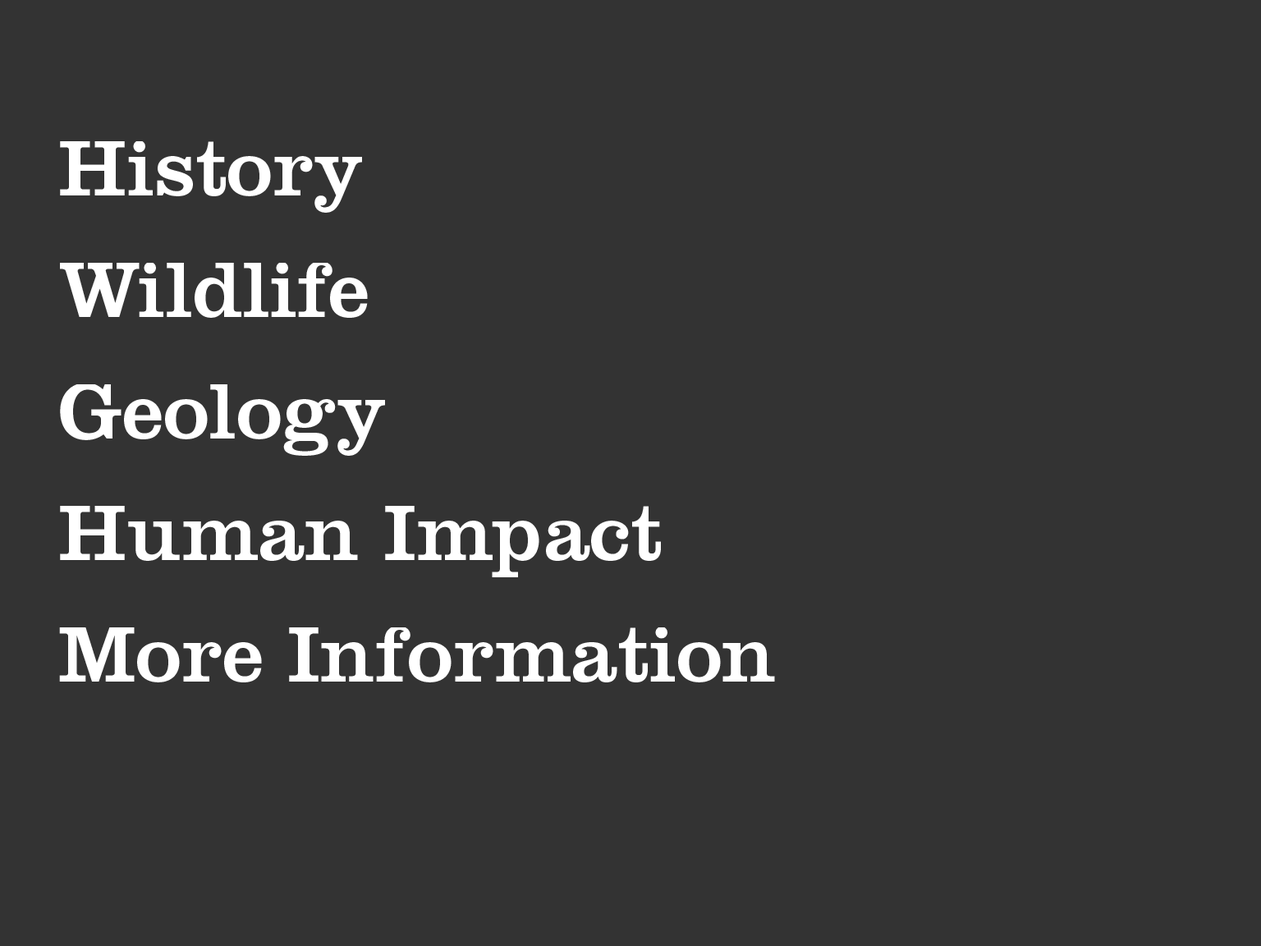
<style>
.page{position:relative;width:1261px;height:946px;background:#333333}
.page>*{position:absolute;margin:0}
.t1{font:82.1px "ClarendonLT";color:#ffffff}
</style>
<div class="page">
<p class="t1" style="left:60px;top:140px;width:302px;height:73px">History</p>
<p class="t1" style="left:60px;top:261px;width:308px;height:57px">Wildlife</p>
<p class="t1" style="left:60px;top:383px;width:325px;height:73px">Geology</p>
<p class="t1" style="left:60px;top:506px;width:601px;height:71px">Human Impact</p>
<p class="t1" style="left:59px;top:626px;width:716px;height:56px">More Information</p>
</div>
